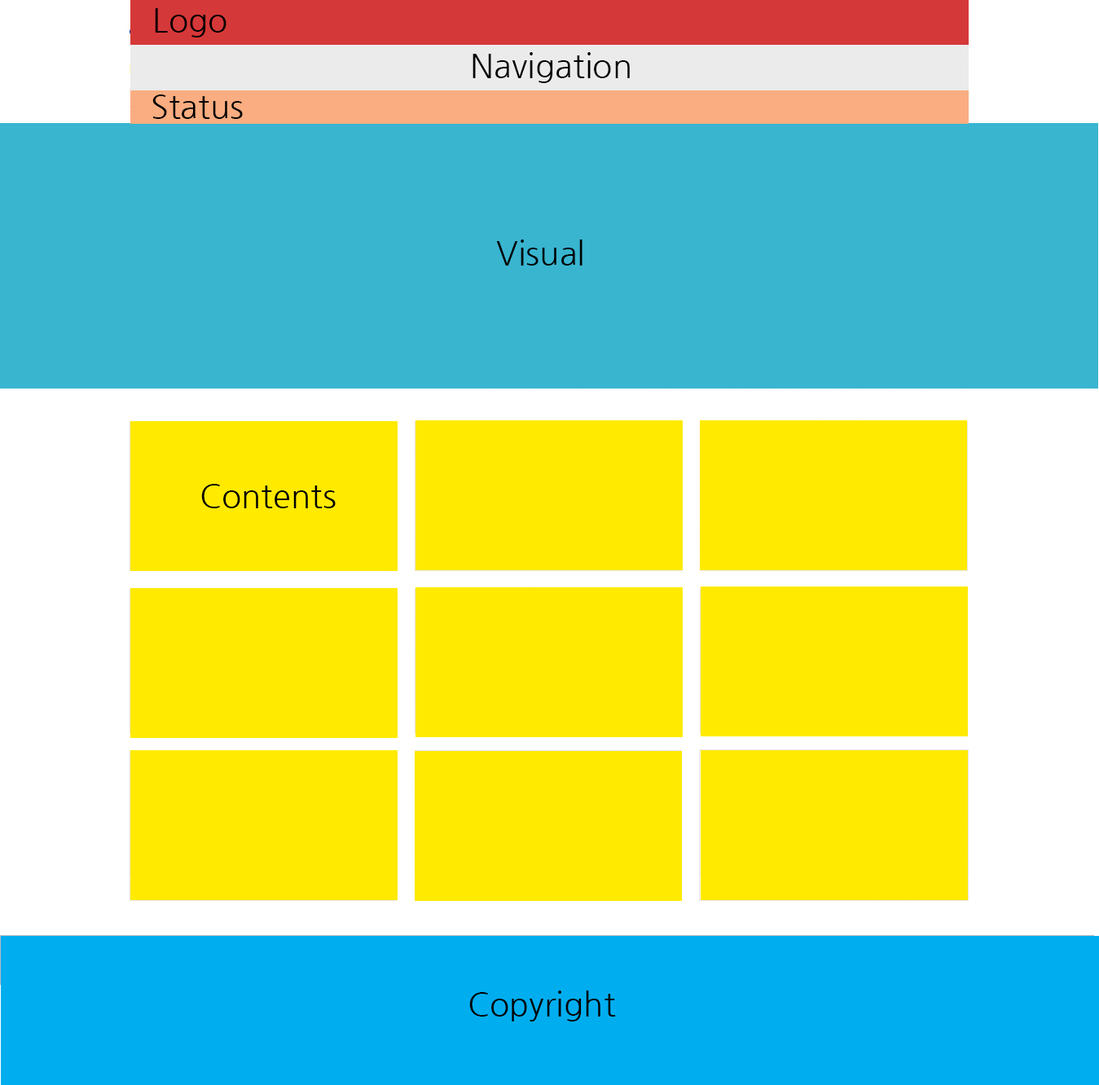
<style>
.page{position:relative;width:1099px;height:1085px;background:#ffea00}
.page>*{position:absolute;margin:0}
.t1{font:32.6px "NanumGothic";color:#000000}
</style>
<div class="page">
<p class="t1" style="left:155px;top:8px;width:71px;height:29px">Logo</p>
<p class="t1" style="left:472px;top:52px;width:158px;height:31px">Navigation</p>
<p class="t1" style="left:152px;top:94px;width:91px;height:25px">Status</p>
<p class="t1" style="left:496px;top:240px;width:86px;height:26px">Visual</p>
<p class="t1" style="left:201px;top:484px;width:135px;height:24px">Contents</p>
<p class="t1" style="left:469px;top:991px;width:147px;height:31px">Copyright</p>
</div>
